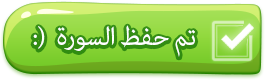
<style>
.page{position:relative;width:265px;height:80px}
.page>*{position:absolute;margin:0}
.t1{font:36px "AdobeArabic-Regular";letter-spacing:-0.02em;color:#ffffff}
</style>
<div class="page">
<p class="t1" style="left:33px;top:25px;width:162px;height:32px">:)  تم حفظ السورة</p>
</div>
